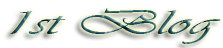
<style>
.page{position:relative;width:223px;height:48px;background:#ffffff}
.page>*{position:absolute;margin:0}
.t1{font:36px "Vivaldii";scale:1.82 1}
</style>
<div class="page">
<p class="t1" style="left:10px;top:8px;width:211px;height:36px">1st Blog</p>
</div>
